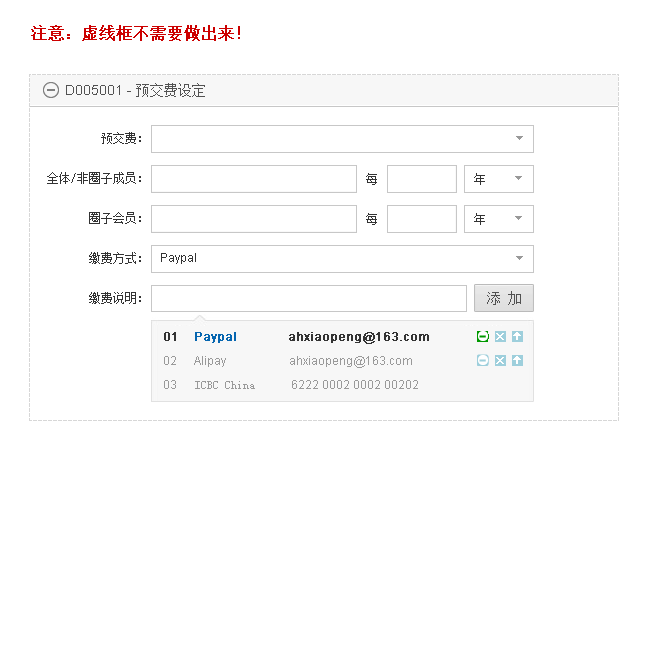
<style>
.page{position:relative;width:654px;height:664px;background:#ffffff}
.page>*{position:absolute;margin:0}
.t1{font:16px "SimSun";color:#cc0000;font-weight:bold}
.t2{font:14px "ArialMT";color:#525252}
.t3{font:14px "SimSun";color:#525252}
.t4{font:12px "SimSun";color:#333333}
.t5{font:12px "ArialMT";color:#333333}
.t6{font:12px/24px "ArialMT";color:#999999}
.t7{font:12px/24px "ArialMT";color:#333333;font-weight:bold}
.t8{font:12px/24px "ArialMT";color:#0666b0;font-weight:bold}
.t9{font:12px/24px "SimSun";color:#999999}
</style>
<div class="page">
<p class="t1" style="left:31px;top:25px;width:209px;height:16px">注意：虚线框不需要做出来！</p>
<p class="t2" style="left:66px;top:83px;width:139px;height:14px">D005001 - <span class="t3">预交费设定</span></p>
<p class="t4" style="left:101px;top:132px;width:40px;height:12px">预交费：</p>
<p class="t4" style="left:47px;top:172px;width:94px;height:12px">全体/非圈子成员：</p>
<p class="t4" style="left:366px;top:173px;width:11px;height:12px">每</p>
<p class="t4" style="left:474px;top:173px;width:11px;height:12px">年</p>
<p class="t4" style="left:89px;top:212px;width:52px;height:12px">圈子会员：</p>
<p class="t4" style="left:366px;top:213px;width:11px;height:12px">每</p>
<p class="t4" style="left:474px;top:213px;width:11px;height:12px">年</p>
<p class="t4" style="left:89px;top:252px;width:52px;height:12px">缴费方式：</p>
<p class="t5" style="left:161px;top:253px;width:35px;height:11px">Paypal</p>
<p class="t4" style="left:89px;top:292px;width:52px;height:12px">缴费说明：</p>
<p class="t6" style="left:164px;top:332px;width:265px;height:57px"><span class="t7">01     </span><span class="t8">Paypal                 </span><span class="t7">ahxiaopeng@163.com<br></span>02      Alipay                     ahxiaopeng@163.com<br>03      <span class="t9">ICBC China</span>            6222 0002 0002 00202</p>
</div>
